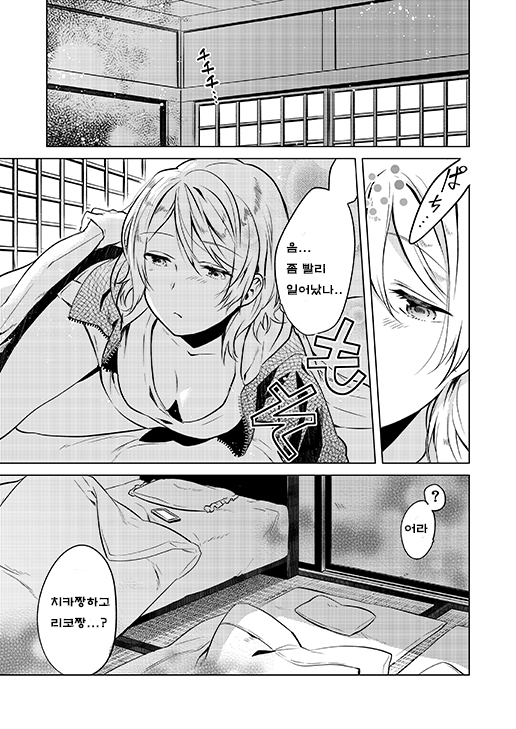
<style>
.page{position:relative;width:516px;height:729px;background:#ffffff}
.page>*{position:absolute;margin:0}
.t1{font:12px "H2mkpB";color:#000000}
</style>
<div class="page">
<p class="t1" style="left:286px;top:242px;width:56px;height:53px">음...<br>좀 빨리<br>일어났나..</p>
<p class="t1" style="left:404px;top:523px;width:24px;height:10px">어라</p>
<p class="t1" style="left:51px;top:596px;width:59px;height:33px">치카짱하고<br>리코짱...?</p>
</div>
